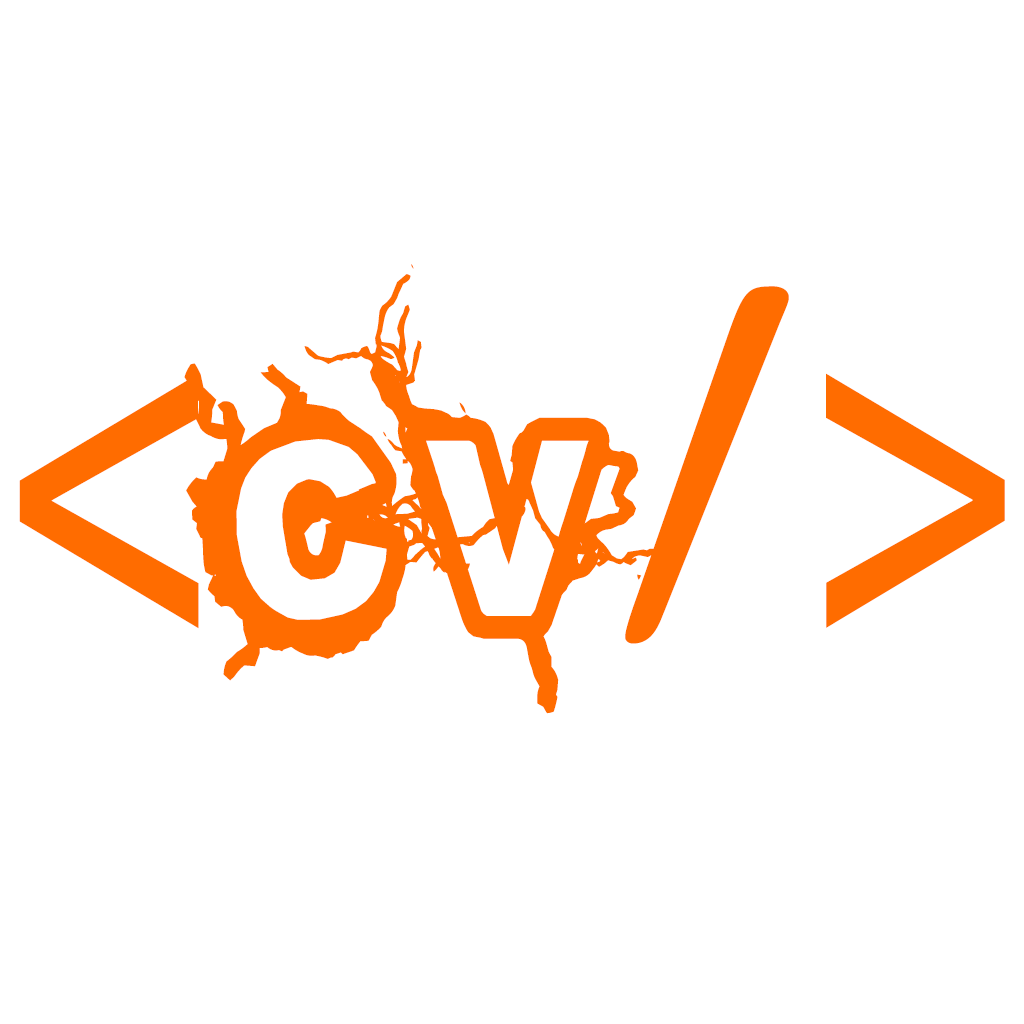
<style>
.page{position:relative;width:1024px;height:1024px;background:#ffffff}
.page>*{position:absolute;margin:0}
.t1{font:414px "INFECTED";color:#ff6c00;scale:0.91 1}
.t2{font:414px "HoboStd";color:#ff6c00;scale:0.91 1}
</style>
<div class="page">
<p class="t1" style="left:19px;top:264px;width:986px;height:450px"><span class="t2">&lt;</span>CV<span class="t2">/&gt;</span></p>
</div>
